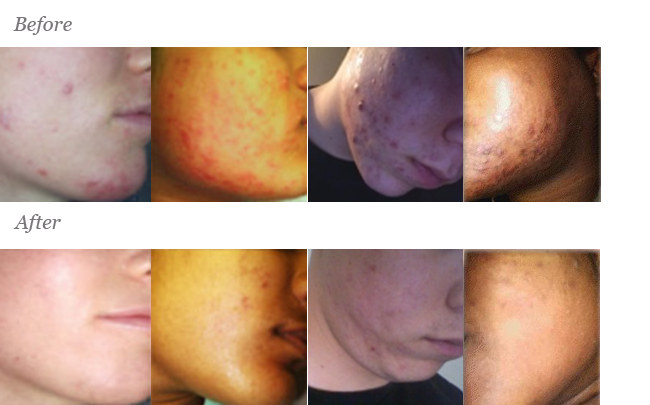
<style>
.page{position:relative;width:650px;height:405px;background:#ffffff}
.page>*{position:absolute;margin:0}
.t1{font:20px "Georgia-Italic";color:#797679}
</style>
<div class="page">
<p class="t1" style="left:13px;top:16px;width:59px;height:19px">Before</p>
<p class="t1" style="left:13px;top:214px;width:48px;height:19px">After</p>
</div>
